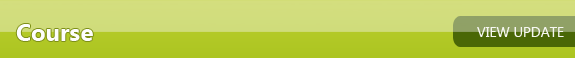
<style>
.page{position:relative;width:575px;height:58px}
.page>*{position:absolute;margin:0}
.t1{font:24px "SegoeUI-Bold";color:#fefefe}
.t2{font:14px "SegoeUI";color:#f6f7f1}
</style>
<div class="page">
<p class="t1" style="left:16px;top:24px;width:77px;height:17px">Course</p>
<p class="t2" style="left:477px;top:27px;width:87px;height:10px">VIEW UPDATE</p>
</div>
